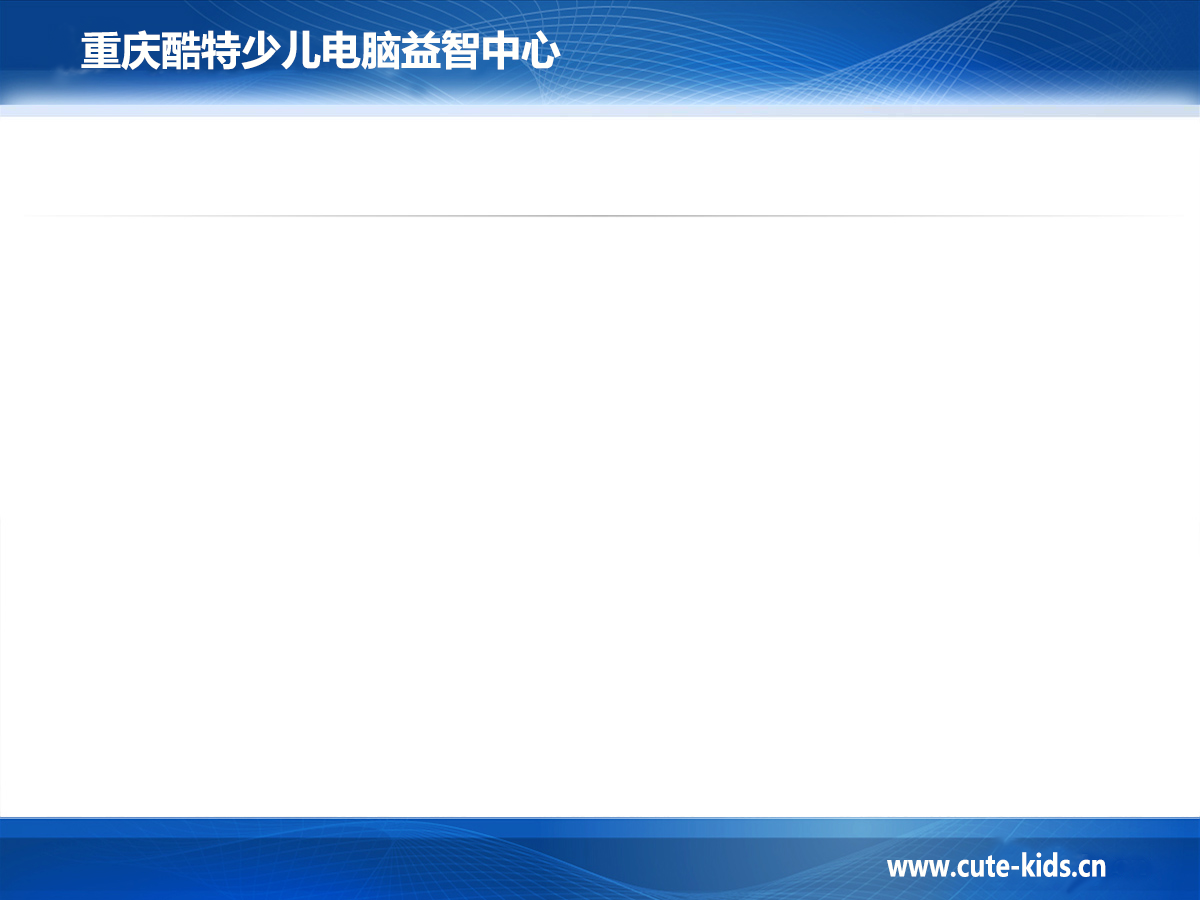
<style>
.page{position:relative;width:1200px;height:900px;background:#ffffff}
.page>*{position:absolute;margin:0}
.t1{font:40px "MicrosoftYaHei-Bold";color:#fffffc}
.t2{font:30px "MicrosoftYaHei-Bold";color:#fffffc;scale:0.82 1}
</style>
<div class="page">
<p class="t1" style="left:81px;top:30px;width:480px;height:40px">重庆酷特少儿电脑益智中心</p>
<p class="t2" style="left:887px;top:852px;width:219px;height:25px">www.cute-kids.cn</p>
</div>
